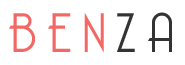
<style>
.page{position:relative;width:185px;height:65px;background:#ffffff}
.page>*{position:absolute;margin:0}
.t1{font:54px "BelleroseLight";letter-spacing:0.2em;color:#f26864;text-transform:uppercase}
.t2{font:54px "BelleroseLight";letter-spacing:0.2em;color:#333333;text-transform:uppercase}
</style>
<div class="page">
<p class="t1" style="left:9px;top:12px;width:163px;height:41px">Ben<span class="t2">za</span></p>
</div>
